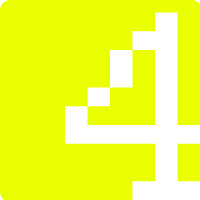
<style>
.page{position:relative;width:200px;height:200px;background:#eaff00}
.page>*{position:absolute;margin:0}
.t1{font:300px "Courier";color:#fefefe;scale:1.2 1}
</style>
<div class="page">
<p class="t1" style="left:65px;top:12px;width:135px;height:188px">4</p>
</div>
